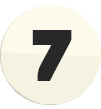
<style>
.page{position:relative;width:101px;height:109px;background:#f4f3e1}
.page>*{position:absolute;margin:0}
.t1{font:72px "MovaviGrotesqueBlack";color:#282828}
</style>
<div class="page">
<p class="t1" style="left:32px;top:30px;width:40px;height:51px">7</p>
</div>
